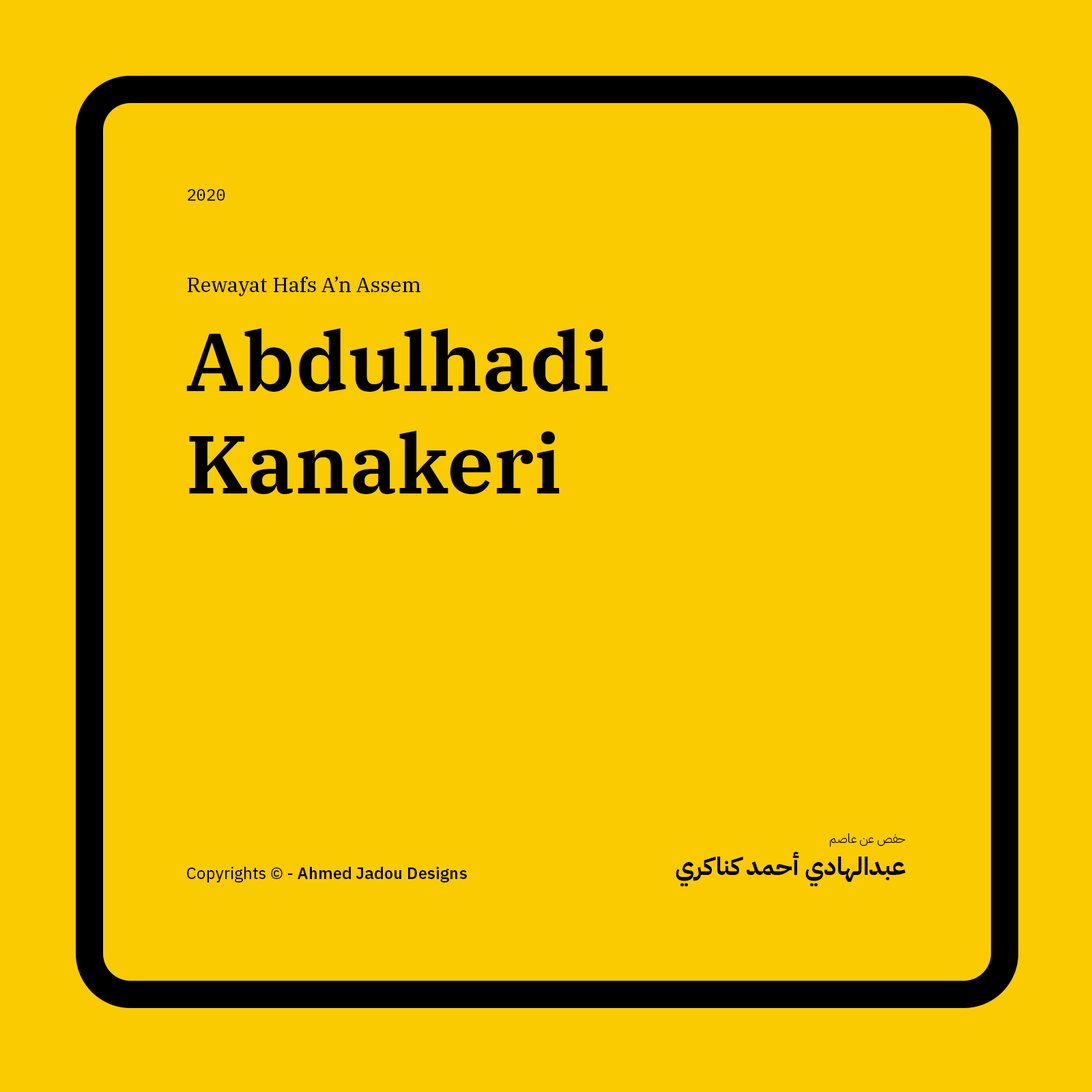
<style>
.page{position:relative;width:1092px;height:1092px;background:#facb00}
.page>*{position:absolute;margin:0}
.t1{font:16.4px "IBMPlexMono-Text";color:#000000}
.t2{font:20.5px "IBMPlexSerif-Text";color:#000000}
.t3{font:81.9px/102.7px "IBMPlexSerif-SemiBold";color:#000000}
.t4{font:12.3px "IBMPlexArabic-Light";color:#000000}
.t5{font:24.6px "IBMPlexArabic-Bold";color:#000000}
.t6{font:16.4px "IBMPlexSans-SemiBold";color:#000000}
.t7{font:16.4px "IBMPlexSans-Text";color:#000000}
</style>
<div class="page">
<p class="t1" style="left:188px;top:189px;width:37px;height:12px">2020</p>
<p class="t2" style="left:187px;top:276px;width:233px;height:20px">Rewayat Hafs A’n Assem</p>
<p class="t3" style="left:186px;top:328px;width:422px;height:166px">Abdulhadi Kanakeri</p>
<p class="t4" style="left:830px;top:833px;width:76px;height:14px">حفص عن عاصم</p>
<p class="t5" style="left:676px;top:852px;width:230px;height:35px">عبدالهادي أحمد كناكري</p>
<p class="t6" style="left:187px;top:867px;width:280px;height:15px"><span class="t7">Copyrights © - </span>Ahmed Jadou Designs</p>
</div>
